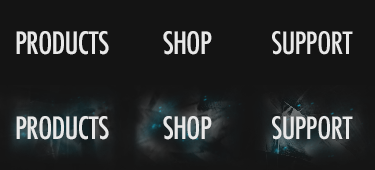
<style>
.page{position:relative;width:375px;height:170px;background:#141414}
.page>*{position:absolute;margin:0}
.t1{font:30px "Futura-CondensedMedium";letter-spacing:-0.025em;color:#e8e8e8}
</style>
<div class="page">
<p class="t1" style="left:16px;top:31px;width:93px;height:24px">PRODUCTS</p>
<p class="t1" style="left:163px;top:31px;width:49px;height:24px">SHOP</p>
<p class="t1" style="left:16px;top:116px;width:93px;height:24px">PRODUCTS</p>
<p class="t1" style="left:163px;top:116px;width:49px;height:24px">SHOP</p>
</div>
